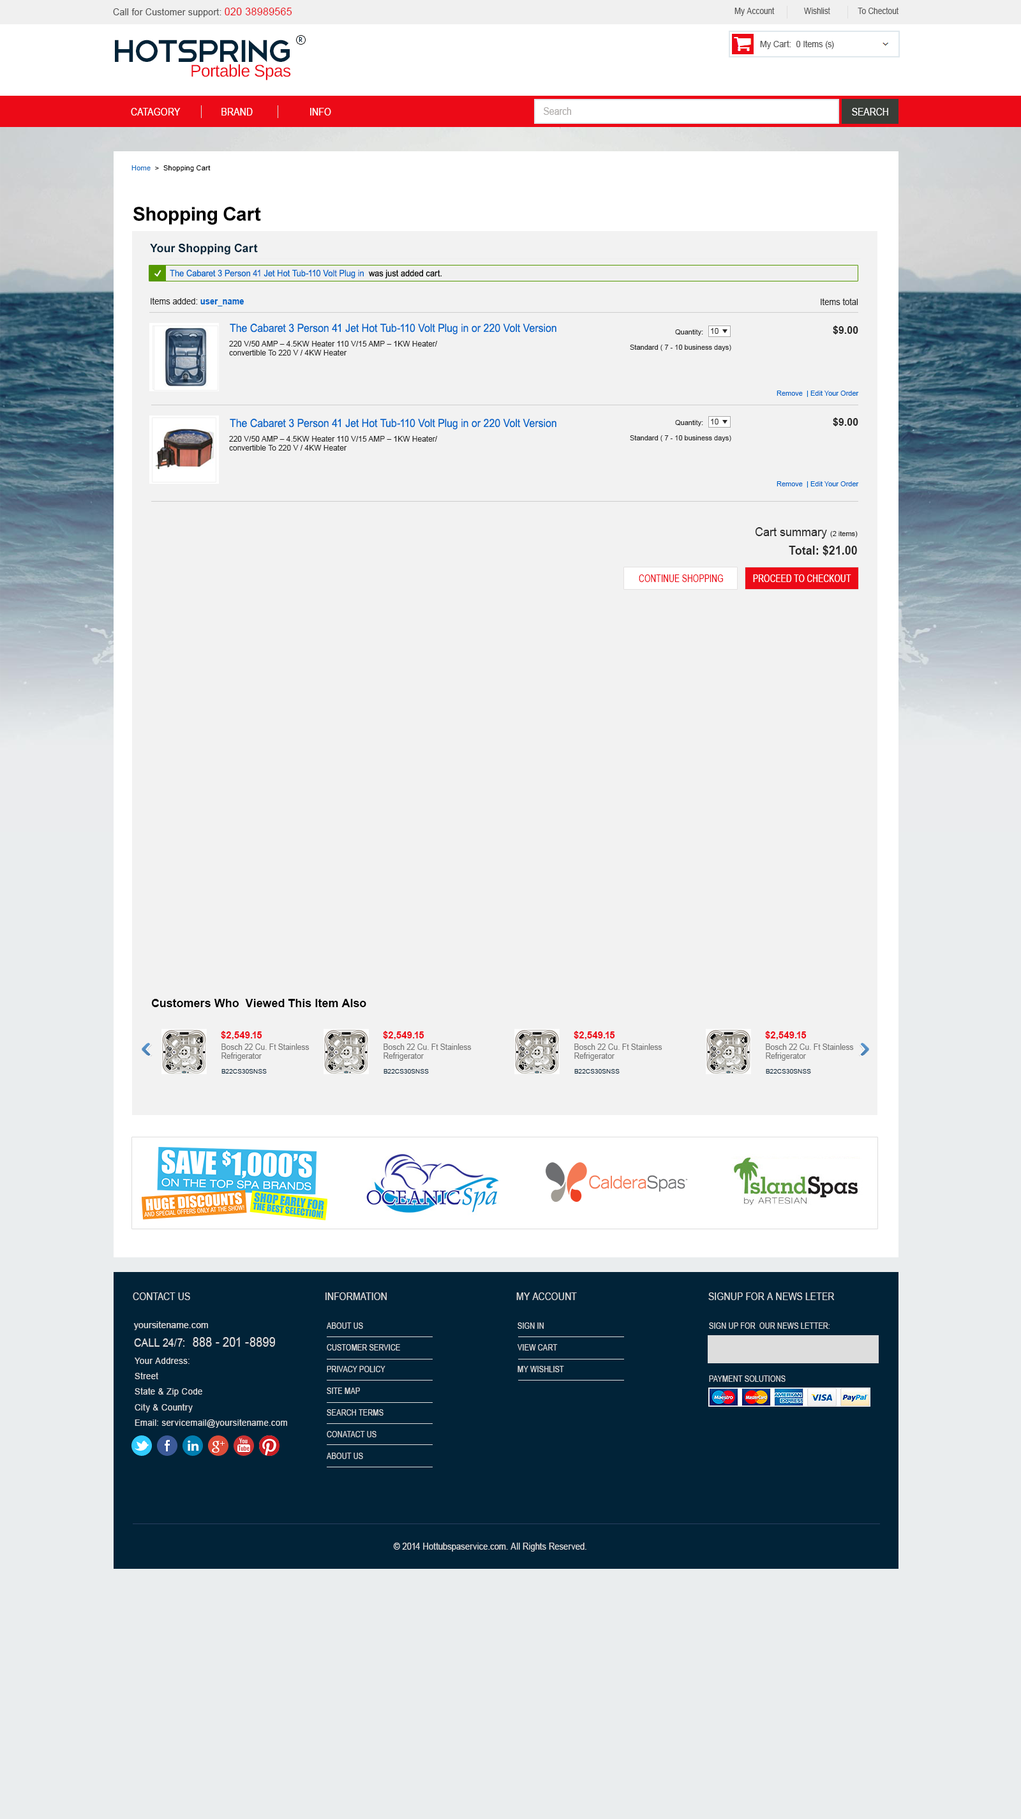
<style>
.page{position:relative;width:1021px;height:1819px;background:#f2f2f2}
.page>*{position:absolute;margin:0}
.t1{font:9.4px "ArialMT";letter-spacing:0.02em;color:#555555;scale:0.95 1}
.t2{font:10.7px "ArialMT";letter-spacing:0.02em;color:#ec0a17;scale:0.95 1}
.t3{font:8.8px "ArialMT";color:#555555;scale:0.87 1}
.t4{font:40.9px "Telegrafico";letter-spacing:-0.08em;color:#012338}
.t5{font:6.7px "HarmoniaSansStd-Regular";letter-spacing:0.03em;color:#012338}
.t6{font:8.7px "ArialMT";color:#555555;scale:0.95 1}
.t7{font:16.8px "LiberationSans";letter-spacing:-0.02em;color:#ec0a17}
.t8{font:10.3px "ArialMT";letter-spacing:0.01em;color:#ffffff;scale:0.87 1}
.t9{font:10.3px "ArialMT";color:#aeaba9;scale:0.87 1}
.t10{font:10.3px "ArialMT";color:#ffffff;scale:0.87 1}
.t11{font:7px "ArialMT";letter-spacing:0.02em;color:#000000}
.t12{font:7px "ArialMT";letter-spacing:0.02em;color:#1d70c0}
.t13{font:19.1px "Arial-BoldMT";letter-spacing:-0.02em;color:#000000}
.t14{font:11.5px "Arial-BoldMT";color:#012338}
.t15{font:9.1px "ArialMT";color:#0064c8;scale:0.91 1}
.t16{font:9.1px "ArialMT";color:#000000;scale:0.91 1}
.t17{font:8.7px "ArialMT";color:#292929;scale:0.95 1}
.t18{font:8.7px "Arial-BoldMT";color:#0064c8;scale:0.95 1}
.t19{font:11.2px "ArialMT";color:#0064c8;scale:0.91 1}
.t20{font:7px "ArialMT";color:#292929}
.t21{font:7.7px "ArialMT";color:#292929}
.t22{font:10.2px "Arial-BoldMT";color:#292929}
.t23{font:7px "ArialMT";color:#0064c8}
.t24{font:12.1px "ArialMT";color:#292929;scale:0.95 1}
.t25{font:12.1px "Arial-BoldMT";color:#292929;scale:0.95 1}
.t26{font:10.5px "ArialMT";color:#ec0a17;text-transform:uppercase;scale:0.75 1}
.t27{font:10.5px "ArialMT";color:#ffffff;text-transform:uppercase;scale:0.75 1}
.t28{font:11.5px "Arial-BoldMT";color:#000000}
.t29{font:9.6px "Arial-BoldMT";color:#ec0a17}
.t30{font:8.4px/8.9px "ArialMT";color:#777777;scale:0.91 1}
.t31{font:6.4px "ArialMT";color:#012338}
.t32{font:10.3px "ArialMT";letter-spacing:0.01em;color:#dddddd;scale:0.87 1}
.t33{font:9.7px "ArialMT";letter-spacing:0.03em;color:#dddddd;scale:0.9 1}
.t34{font:8.1px/21.7px "ArialMT";letter-spacing:0.01em;color:#dddddd;scale:0.87 1}
.t35{font:8.1px "ArialMT";letter-spacing:0.01em;color:#dddddd;scale:0.87 1}
.t36{font:13.2px "ArialMT";letter-spacing:0.01em;color:#dddddd;scale:0.87 1}
.t37{font:11.7px "ArialMT";letter-spacing:0.01em;color:#dddddd;scale:0.87 1}
.t38{font:9px/15.4px "ArialMT";letter-spacing:0.03em;color:#dddddd;scale:0.94 1}
.t39{font:9.5px "ArialMT";letter-spacing:0.01em;color:#dddddd;scale:0.87 1}
</style>
<div class="page">
<p class="t1" style="left:113px;top:8px;width:179px;height:9px">Call for Customer support: <span class="t2">020 38989565</span></p>
<p class="t3" style="left:734px;top:7px;width:164px;height:9px">My Account              Wishlist             To Chectout</p>
<p class="t4" style="left:115px;top:40px;width:175px;height:22px">HotSpring</p>
<p class="t5" style="left:299px;top:37px;width:3px;height:5px">R</p>
<p class="t6" style="left:760px;top:40px;width:74px;height:9px">My Cart:  0 Items (s)</p>
<p class="t7" style="left:191px;top:64px;width:100px;height:16px">Portable Spas</p>
<p class="t8" style="left:131px;top:108px;width:200px;height:7px">CATAGORY                BRAND                      INFO</p>
<p class="t9" style="left:544px;top:107px;width:27px;height:8px">Search</p>
<p class="t10" style="left:852px;top:108px;width:36px;height:7px">SEARCH</p>
<p class="t11" style="left:131px;top:165px;width:80px;height:7px"><span class="t12">Home </span> &gt;  Shopping Cart</p>
<p class="t13" style="left:133px;top:207px;width:128px;height:18px">Shopping Cart</p>
<p class="t14" style="left:150px;top:243px;width:108px;height:12px">Your Shopping Cart</p>
<p class="t15" style="left:170px;top:269px;width:272px;height:10px">The Cabaret 3 Person 41 Jet Hot Tub-110 Volt Plug in  <span class="t16">was just added cart.</span></p>
<p class="t17" style="left:151px;top:297px;width:93px;height:9px">Items added: <span class="t18">user_name</span></p>
<p class="t17" style="left:821px;top:298px;width:37px;height:7px">Items total</p>
<p class="t19" style="left:230px;top:324px;width:326px;height:10px">The Cabaret 3 Person 41 Jet Hot Tub-110 Volt Plug in or 220 Volt Version</p>
<p class="t20" style="left:675px;top:329px;width:28px;height:7px">Quantity:</p>
<p class="t21" style="left:711px;top:328px;width:7px;height:6px">10</p>
<p class="t22" style="left:833px;top:325px;width:25px;height:9px">$9.00</p>
<p class="t21" style="left:229px;top:341px;width:209px;height:14px">220 V/50 AMP – 4.5KW Heater 110 V/15 AMP – 1KW Heater/ <br>convertible To 220 V / 4KW Heater</p>
<p class="t20" style="left:630px;top:345px;width:101px;height:6px">Standard ( 7 - 10 business days)</p>
<p class="t23" style="left:777px;top:391px;width:82px;height:6px">Remove  | Edit Your Order</p>
<p class="t19" style="left:230px;top:419px;width:326px;height:10px">The Cabaret 3 Person 41 Jet Hot Tub-110 Volt Plug in or 220 Volt Version</p>
<p class="t20" style="left:675px;top:420px;width:28px;height:6px">Quantity:</p>
<p class="t21" style="left:711px;top:419px;width:7px;height:5px">10</p>
<p class="t22" style="left:833px;top:417px;width:25px;height:9px">$9.00</p>
<p class="t21" style="left:229px;top:436px;width:209px;height:14px">220 V/50 AMP – 4.5KW Heater 110 V/15 AMP – 1KW Heater/ <br>convertible To 220 V / 4KW Heater</p>
<p class="t20" style="left:630px;top:435px;width:101px;height:7px">Standard ( 7 - 10 business days)</p>
<p class="t23" style="left:777px;top:481px;width:82px;height:7px">Remove  | Edit Your Order</p>
<p class="t24" style="left:755px;top:527px;width:72px;height:12px">Cart summary</p>
<p class="t20" style="left:830px;top:531px;width:28px;height:6px">(2 items)</p>
<p class="t25" style="left:789px;top:545px;width:68px;height:11px">Total: $21.00</p>
<p class="t26" style="left:639px;top:574px;width:84px;height:8px">continue shopping</p>
<p class="t27" style="left:753px;top:574px;width:98px;height:8px">proceed to checkout</p>
<p class="t28" style="left:151px;top:999px;width:215px;height:8px">Customers Who  Viewed This Item Also</p>
<p class="t29" style="left:221px;top:1031px;width:41px;height:8px">$2,549.15</p>
<p class="t29" style="left:383px;top:1031px;width:41px;height:8px">$2,549.15</p>
<p class="t29" style="left:574px;top:1031px;width:41px;height:8px">$2,549.15</p>
<p class="t29" style="left:765px;top:1031px;width:42px;height:8px">$2,549.15</p>
<p class="t30" style="left:221px;top:1043px;width:88px;height:18px;text-align:justify">Bosch 22 Cu. Ft Stainless<br>Refrigerator</p>
<p class="t30" style="left:383px;top:1043px;width:89px;height:18px;text-align:justify">Bosch 22 Cu. Ft Stainless<br>Refrigerator</p>
<p class="t30" style="left:574px;top:1043px;width:88px;height:18px;text-align:justify">Bosch 22 Cu. Ft Stainless<br>Refrigerator</p>
<p class="t30" style="left:766px;top:1043px;width:88px;height:18px;text-align:justify">Bosch 22 Cu. Ft Stainless<br>Refrigerator</p>
<p class="t31" style="left:221px;top:1069px;width:46px;height:4px">B22CS30SNSS</p>
<p class="t31" style="left:383px;top:1069px;width:46px;height:4px">B22CS30SNSS</p>
<p class="t31" style="left:574px;top:1069px;width:46px;height:4px">B22CS30SNSS</p>
<p class="t31" style="left:766px;top:1069px;width:45px;height:4px">B22CS30SNSS</p>
<p class="t32" style="left:133px;top:1292px;width:57px;height:8px">CONTACT US</p>
<p class="t32" style="left:325px;top:1292px;width:62px;height:8px">INFORMATION</p>
<p class="t32" style="left:516px;top:1292px;width:61px;height:8px">MY ACCOUNT</p>
<p class="t32" style="left:708px;top:1292px;width:127px;height:8px">SIGNUP FOR A NEWS LETER</p>
<p class="t33" style="left:133px;top:1321px;width:75px;height:9px">yoursitename.com</p>
<p class="t34" style="left:327px;top:1322px;width:73px;height:137px;text-align:justify">ABOUT US<br>CUSTOMER SERVICE<br>PRIVACY POLICY <br>SITE MAP<br>SEARCH TERMS<br>CONATACT US<br>ABOUT US</p>
<p class="t34" style="left:517px;top:1322px;width:47px;height:50px;text-align:justify">SIGN IN<br>VIEW CART<br>MY WISHLIST</p>
<p class="t35" style="left:709px;top:1322px;width:121px;height:7px">SIGN UP FOR  OUR NEWS LETTER:</p>
<p class="t36" style="left:134px;top:1337px;width:141px;height:9px"><span class="t37">CALL 24/7:  </span>888 - 201 -8899</p>
<p class="t38" style="left:135px;top:1357px;width:152px;height:70px;text-align:justify">Your Address:<br>Street<br>State &amp; Zip Code<br>City &amp; Country <br>Email: servicemail@yoursitename.com</p>
<p class="t35" style="left:709px;top:1375px;width:76px;height:6px">PAYMENT SOLUTIONS</p>
<p class="t39" style="left:393px;top:1542px;width:193px;height:9px">© 2014 Hottubspaservice.com. All Rights Reserved.</p>
</div>
